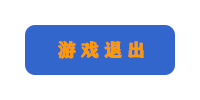
<style>
.page{position:relative;width:200px;height:100px;background:#ffffff}
.page>*{position:absolute;margin:0}
.t1{font:18px "FZCHSJW--GB1-0";letter-spacing:0.25em;color:#ff9900;font-weight:bold}
</style>
<div class="page">
<p class="t1" style="left:58px;top:40px;width:86px;height:19px">游戏退出</p>
</div>
